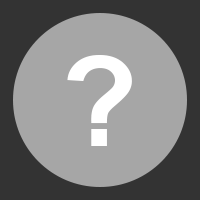
<style>
.page{position:relative;width:200px;height:200px;background:#a6a6a6}
.page>*{position:absolute;margin:0}
.t1{font:125px "Arial-BoldMT";color:#ffffff}
</style>
<div class="page">
<p class="t1" style="left:67px;top:55px;width:65px;height:91px">?</p>
</div>
